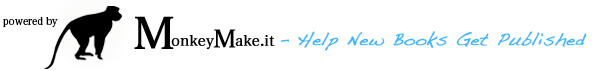
<style>
.page{position:relative;width:604px;height:71px;background:#ffffff}
.page>*{position:absolute;margin:0}
.t1{font:10px "HiraMinPro-W3";color:#000000}
.t2{font:43.8px "HiraMinPro-W3";color:#000000;font-weight:bold}
.t3{font:24.5px "HiraMinPro-W3";color:#000000;font-weight:bold}
.t4{font:14.6px "HiraMinPro-W3";color:#000000;font-weight:bold}
.t5{font:17.7px "Handwriting-Dakota";color:#42b5ff;font-weight:bold}
</style>
<div class="page">
<p class="t1" style="left:3px;top:17px;width:55px;height:10px">powered by</p>
<p class="t2" style="left:134px;top:16px;width:40px;height:33px">M</p>
<p class="t3" style="left:213px;top:29px;width:23px;height:19px">M</p>
<p class="t4" style="left:171px;top:35px;width:43px;height:14px">onkey</p>
<p class="t4" style="left:235px;top:35px;width:40px;height:11px">ake.it</p>
<p class="t5" style="left:280px;top:31px;width:307px;height:20px">- Help New Books Get Published</p>
</div>
